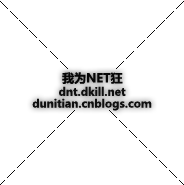
<style>
.page{position:relative;width:184px;height:185px;background:#ffffff}
.page>*{position:absolute;margin:0}
.t1{font:12px "MicrosoftYaHei-Bold";color:#040404}
.t2{font:11px "MicrosoftYaHei-Bold";color:#0d0d0d}
</style>
<div class="page">
<p class="t1" style="left:62px;top:72px;width:61px;height:12px">我为NET狂</p>
<p class="t2" style="left:59px;top:86px;width:67px;height:10px">dnt.dkill.net</p>
<p class="t2" style="left:32px;top:98px;width:120px;height:13px">dunitian.cnblogs.com</p>
</div>
